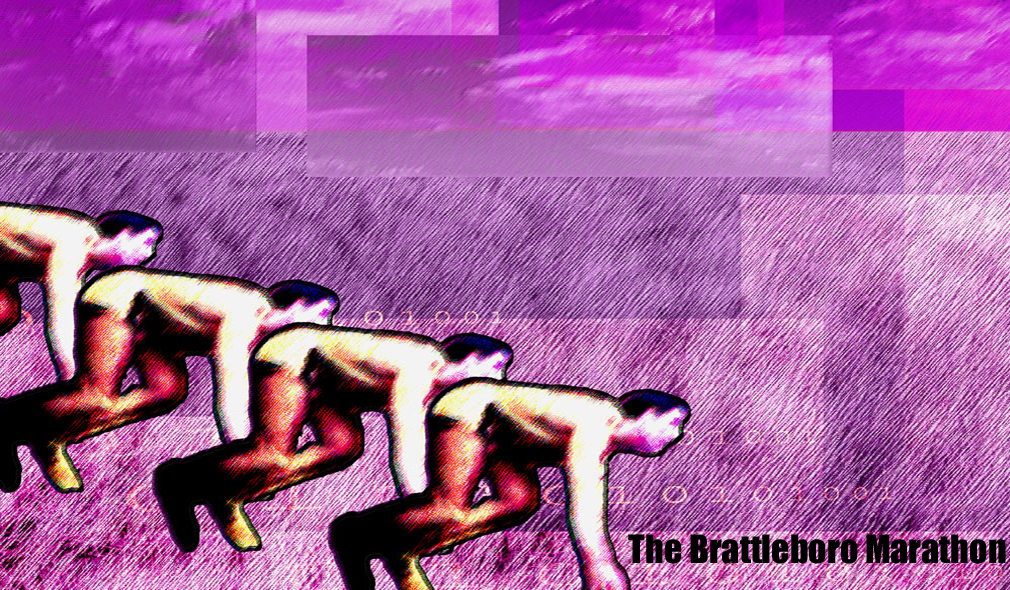
<style>
.page{position:relative;width:1010px;height:590px}
.page>*{position:absolute;margin:0}
.t1{font:36px "Impact";color:#000000}
</style>
<div class="page">
<p class="t1" style="left:628px;top:534px;width:378px;height:30px">The Brattleboro Marathon</p>
</div>
